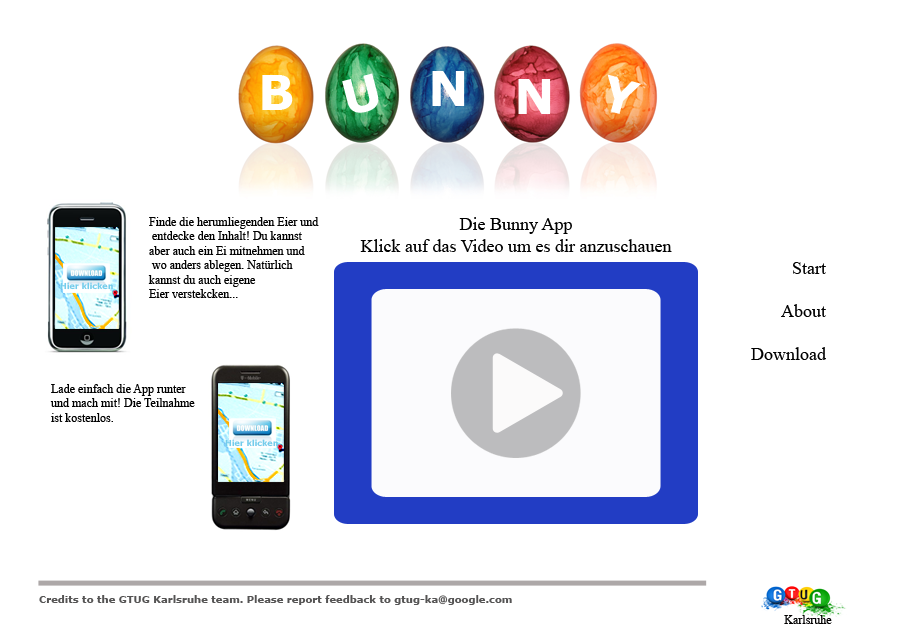
<style>
.page{position:relative;width:920px;height:640px;background:#ffffff}
.page>*{position:absolute;margin:0}
.t1{font:48px "Verdana-Bold";color:#ffffff}
.t2{font:12px "TimesNewRomanPSMT";color:#000000}
.t3{font:18px "TimesNewRomanPSMT";color:#000000}
.t4{font:8px "Verdana-Bold";color:#73cceb}
.t5{font:10px "Verdana-Bold";color:#555454}
.t6{font:12px "TimesNewRomanPSMT";color:#010000}
</style>
<div class="page">
<p class="t1" style="left:262px;top:75px;width:31px;height:35px">B</p>
<p class="t1" style="left:342px;top:73px;width:37px;height:40px;rotate:-14deg">U</p>
<p class="t1" style="left:432px;top:71px;width:33px;height:35px">N</p>
<p class="t1" style="left:607px;top:74px;width:35px;height:40px;rotate:16deg">Y</p>
<p class="t1" style="left:518px;top:79px;width:33px;height:35px">N</p>
<p class="t2" style="left:148px;top:217px;width:171px;height:81px">Finde die herumliegenden Eier und<br> entdecke den Inhalt! Du kannst <br>aber auch ein Ei mitnehmen und<br> wo anders ablegen. Natürlich <br>kannst du auch eigene <br>Eier verstekcken...</p>
<p class="t3" style="left:360px;top:217px;width:312px;height:35px;text-align:center">Die Bunny App<br>Klick auf das Video um es dir anzuschauen</p>
<p class="t3" style="left:751px;top:262px;width:75px;height:98px;text-align:right">Start<br><br>About<br><br>Download</p>
<p class="t4" style="left:60px;top:282px;width:53px;height:8px">Hier klicken</p>
<p class="t2" style="left:50px;top:384px;width:145px;height:38px">Lade einfach die App runter <br>und mach mit! Die Teilnahme <br>ist kostenlos.</p>
<p class="t4" style="left:225px;top:439px;width:53px;height:8px">Hier klicken</p>
<p class="t5" style="left:39px;top:595px;width:473px;height:10px">Credits to the GTUG Karlsruhe team. Please report feedback to gtug-ka@google.com</p>
<p class="t6" style="left:784px;top:615px;width:48px;height:9px">Karlsruhe</p>
</div>
